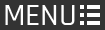
<style>
.page{position:relative;width:105px;height:30px;background:#333333}
.page>*{position:absolute;margin:0}
.t1{font:32.3px "Rajdhani-Medium";color:#ffffff}
</style>
<div class="page">
<p class="t1" style="left:5px;top:5px;width:70px;height:20px">MENU</p>
</div>
